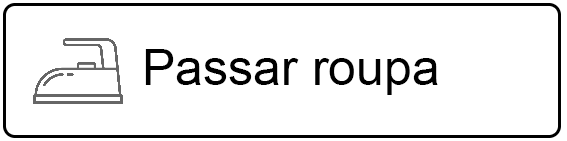
<style>
.page{position:relative;width:567px;height:141px;background:#ffffff}
.page>*{position:absolute;margin:0}
.t1{font:50px "ArialMT";color:#000000}
</style>
<div class="page">
<p class="t1" style="left:145px;top:49px;width:293px;height:46px">Passar roupa</p>
</div>
